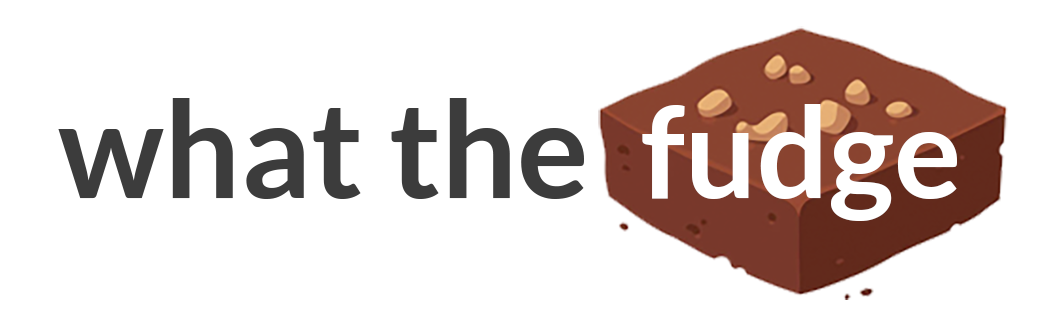
<style>
.page{position:relative;width:1059px;height:330px;background:#ffffff}
.page>*{position:absolute;margin:0}
.t1{font:134.4px "Lato-Bold";color:#3c3c3c}
.t2{font:126.4px "Lato-Bold";color:#ffffff}
</style>
<div class="page">
<p class="t1" style="left:58px;top:98px;width:899px;height:123px">what the  <span class="t2">fudge</span></p>
</div>
